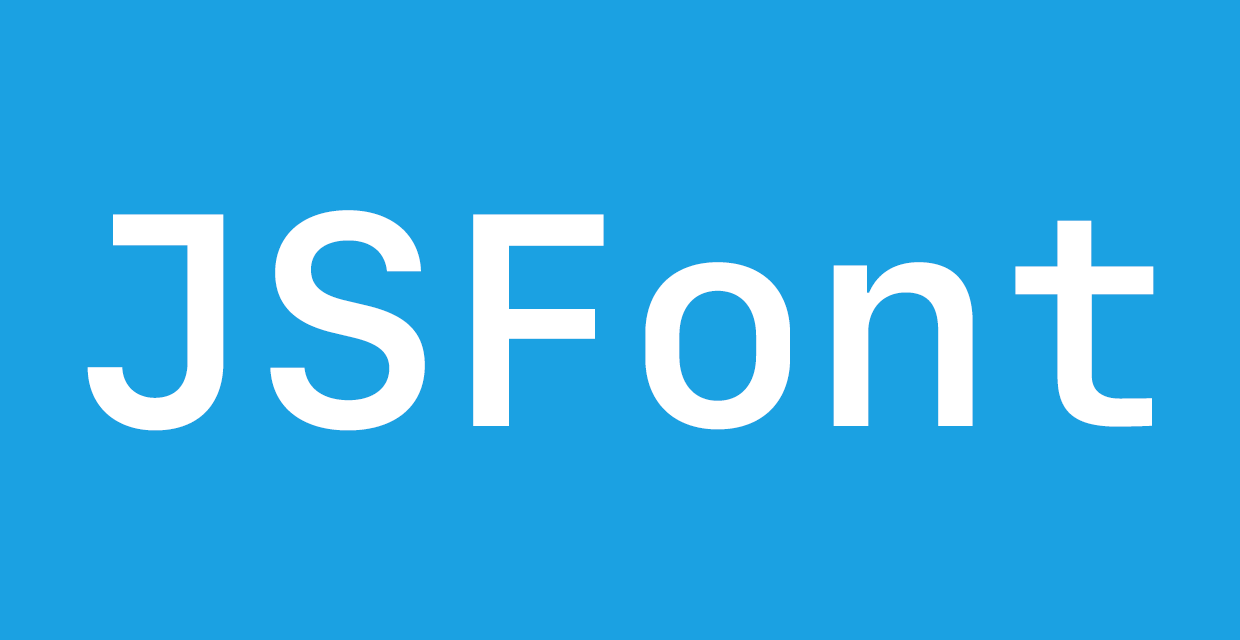
<style>
.page{position:relative;width:1240px;height:640px;background:#1ba1e2}
.page>*{position:absolute;margin:0}
.t1{font:300px "SFMono-Semibold";color:#ffffff}
</style>
<div class="page">
<p class="t1" style="left:87px;top:210px;width:1067px;height:221px">JSFont</p>
</div>
